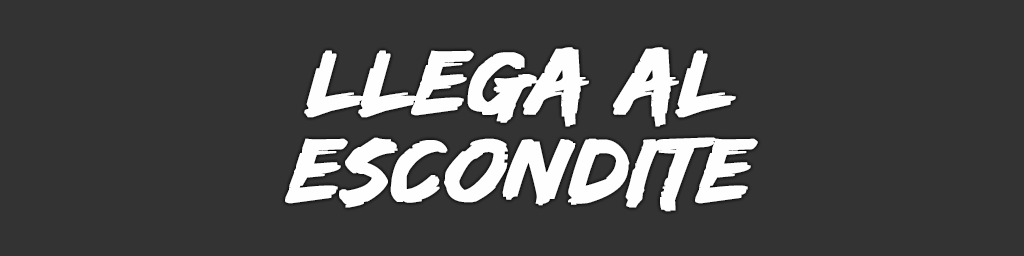
<style>
.page{position:relative;width:1024px;height:256px;background:#333333}
.page>*{position:absolute;margin:0}
.t1{font:94px/88px "EdoSZ";color:#fefefe;font-weight:bold;font-style:italic;scale:1.04 1}
</style>
<div class="page">
<p class="t1" style="left:285px;top:47px;width:473px;height:165px;text-align:center">Llega al<br>escondite</p>
</div>
